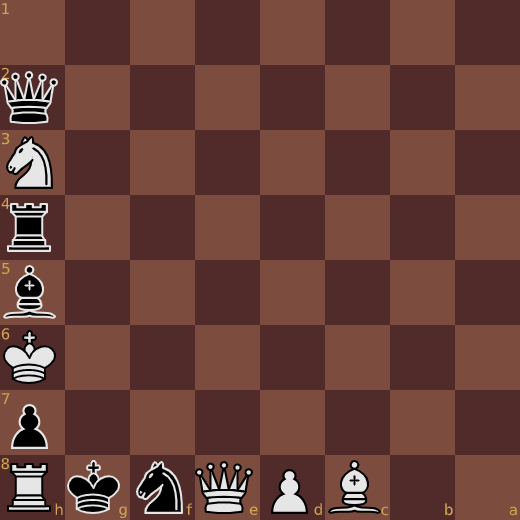
<style>
.page{position:relative;width:520px;height:520px;background:#7c4c3e}
.page>*{position:absolute;margin:0}
.t1{font:15px "DejaVuSans";color:#d4a552}
</style>
<div class="page">
<p class="t1" style="left:2px;top:3px;width:7px;height:12px">1</p>
<p class="t1" style="left:1px;top:67px;width:8px;height:12px">2</p>
<p class="t1" style="left:1px;top:132px;width:9px;height:13px">3</p>
<p class="t1" style="left:1px;top:197px;width:9px;height:12px">4</p>
<p class="t1" style="left:2px;top:262px;width:8px;height:13px">5</p>
<p class="t1" style="left:1px;top:328px;width:9px;height:12px">6</p>
<p class="t1" style="left:2px;top:393px;width:8px;height:12px">7</p>
<p class="t1" style="left:1px;top:457px;width:9px;height:13px">8</p>
<p class="t1" style="left:55px;top:503px;width:8px;height:12px">h</p>
<p class="t1" style="left:119px;top:506px;width:8px;height:12px">g</p>
<p class="t1" style="left:186px;top:503px;width:7px;height:12px">f</p>
<p class="t1" style="left:249px;top:506px;width:9px;height:10px">e</p>
<p class="t1" style="left:314px;top:503px;width:8px;height:12px">d</p>
<p class="t1" style="left:381px;top:506px;width:7px;height:10px">c</p>
<p class="t1" style="left:445px;top:503px;width:8px;height:13px">b</p>
<p class="t1" style="left:509px;top:506px;width:8px;height:10px">a</p>
</div>
